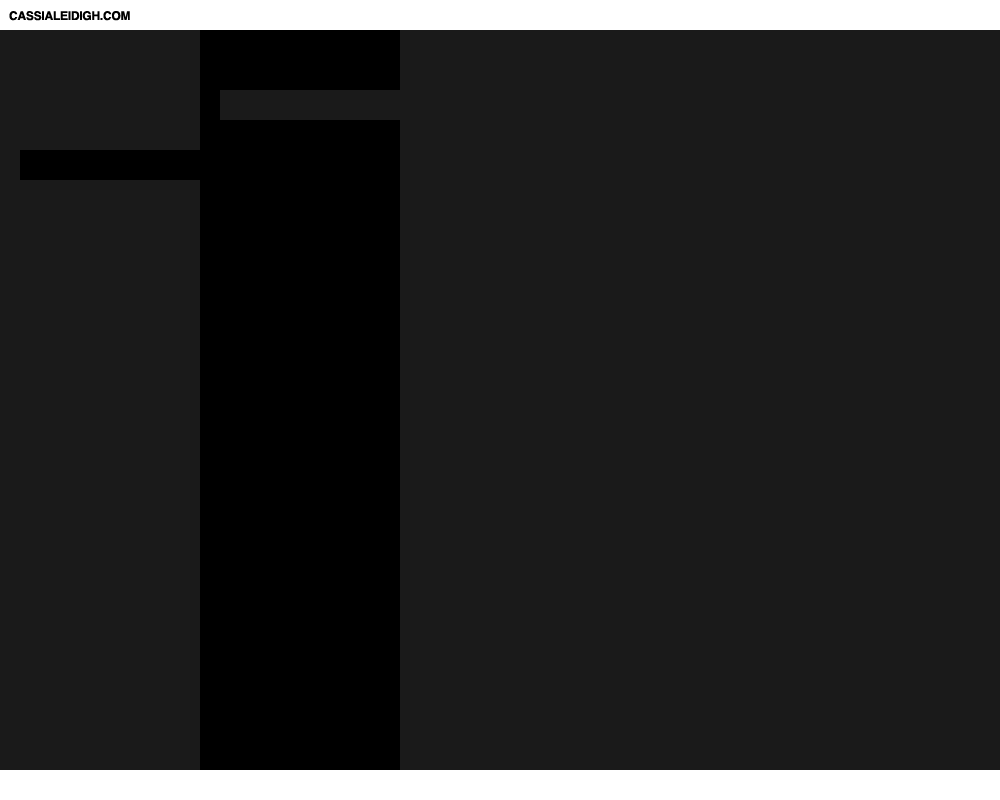
<style>
.page{position:relative;width:1000px;height:800px;background:#1a1a1a}
.page>*{position:absolute;margin:0}
.t1{font:12px "Helvetica-Bold";letter-spacing:-0.02em;color:#000000;text-transform:uppercase}
</style>
<div class="page">
<p class="t1" style="left:9px;top:11px;width:121px;height:10px">Cassialeidigh.com</p>
</div>
